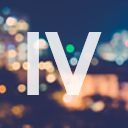
<style>
.page{position:relative;width:128px;height:128px}
.page>*{position:absolute;margin:0}
.t1{font:84px "FlorencesansSCBlack";color:#e0e2e5}
</style>
<div class="page">
<p class="t1" style="left:27px;top:32px;width:75px;height:63px">IV</p>
</div>
